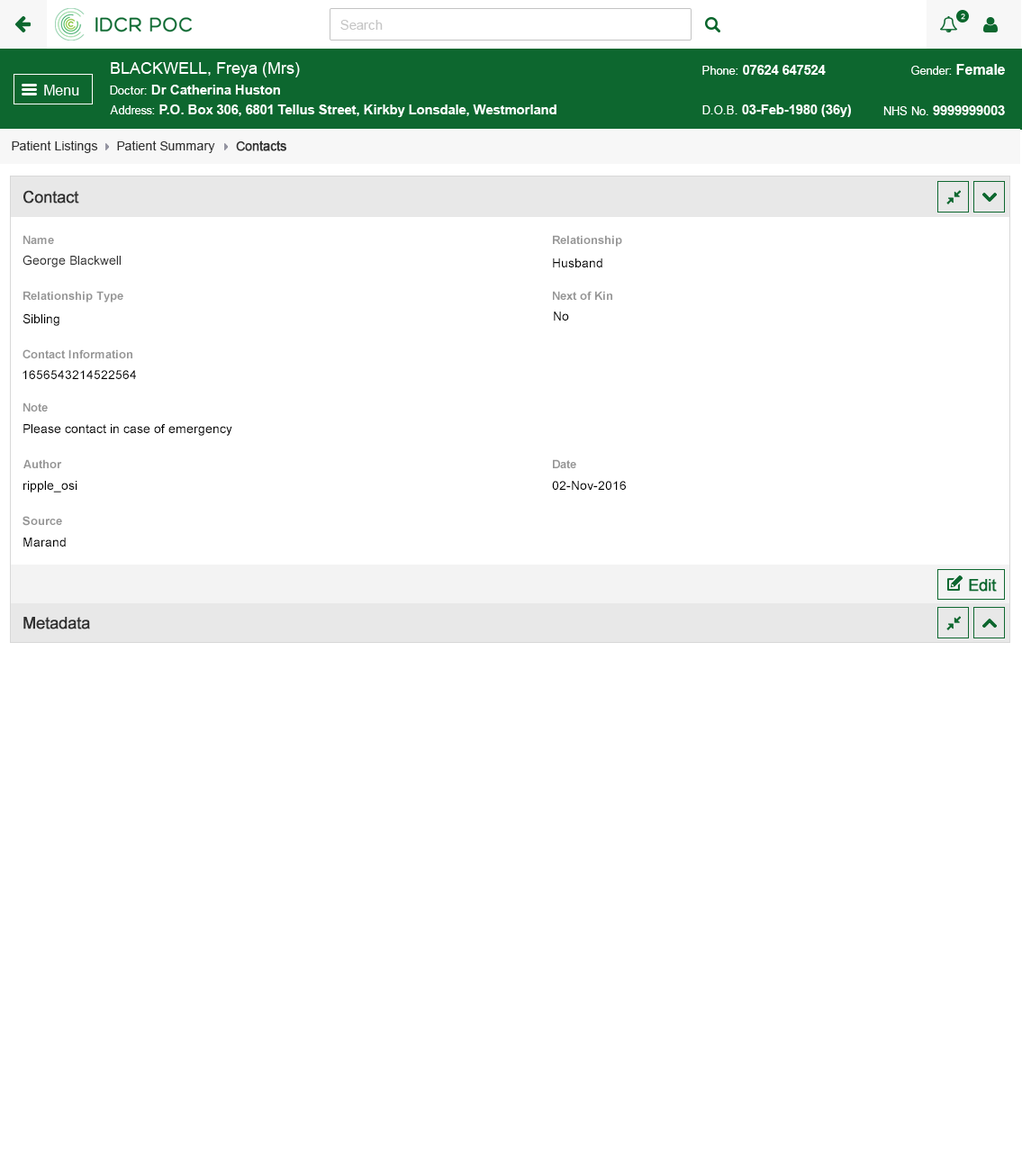
<style>
.page{position:relative;width:1022px;height:1167px;background:#ffffff}
.page>*{position:absolute;margin:0}
.t1{font:12.6px "ArialMT";color:#313131}
.t2{font:12.6px "ArialMT";color:#313131;font-weight:bold}
.t3{font:16.2px "ArialMT";color:#303030;font-weight:bold}
.t4{font:11.7px "Arial-BoldMT";color:#959595}
.t5{font:12.6px "ArialMT";color:#303030}
.t6{font:12.6px "ArialMT";color:#000000}
</style>
<div class="page">
<p class="t1" style="left:12px;top:140px;width:86px;height:13px">Patient Listings</p>
<p class="t1" style="left:117px;top:140px;width:98px;height:13px">Patient Summary</p>
<p class="t2" style="left:236px;top:140px;width:50px;height:11px">Contacts</p>
<p class="t3" style="left:23px;top:190px;width:56px;height:13px">Contact</p>
<p class="t4" style="left:23px;top:235px;width:31px;height:9px">Name</p>
<p class="t4" style="left:553px;top:235px;width:69px;height:12px">Relationship</p>
<p class="t5" style="left:23px;top:255px;width:98px;height:12px">George Blackwell</p>
<p class="t6" style="left:553px;top:258px;width:49px;height:9px">Husband</p>
<p class="t4" style="left:23px;top:291px;width:100px;height:12px">Relationship Type</p>
<p class="t4" style="left:553px;top:291px;width:59px;height:9px">Next of Kin</p>
<p class="t6" style="left:23px;top:313px;width:36px;height:13px">Sibling</p>
<p class="t6" style="left:554px;top:312px;width:15px;height:9px">No</p>
<p class="t4" style="left:23px;top:349px;width:109px;height:9px">Contact Information</p>
<p class="t6" style="left:23px;top:370px;width:113px;height:9px">1656543214522564</p>
<p class="t4" style="left:23px;top:402px;width:25px;height:9px">Note</p>
<p class="t6" style="left:23px;top:424px;width:209px;height:12px">Please contact in case of emergency</p>
<p class="t4" style="left:23px;top:459px;width:39px;height:9px">Author</p>
<p class="t4" style="left:553px;top:459px;width:23px;height:9px">Date</p>
<p class="t6" style="left:23px;top:481px;width:54px;height:11px">ripple_osi</p>
<p class="t6" style="left:552px;top:481px;width:74px;height:9px">02-Nov-2016</p>
<p class="t4" style="left:23px;top:516px;width:39px;height:10px">Source</p>
<p class="t6" style="left:23px;top:538px;width:43px;height:9px">Marand</p>
<p class="t3" style="left:23px;top:617px;width:67px;height:12px">Metadata</p>
</div>
